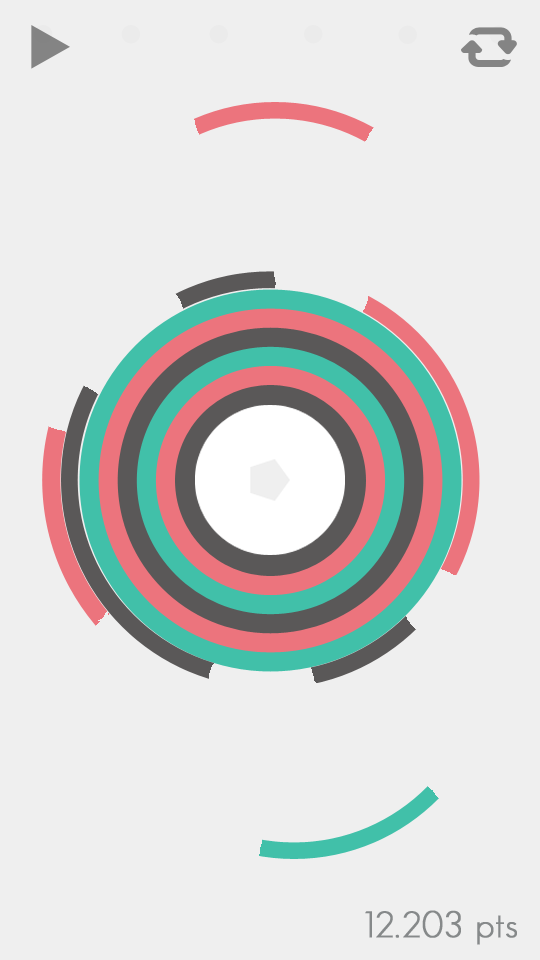
<style>
.page{position:relative;width:540px;height:960px;background:#efefef}
.page>*{position:absolute;margin:0}
.t1{font:36px "GeosansLight";letter-spacing:0.018em;color:#86898a;font-weight:bold}
</style>
<div class="page">
<p class="t1" style="left:365px;top:910px;width:152px;height:35px">12.203 pts</p>
</div>
